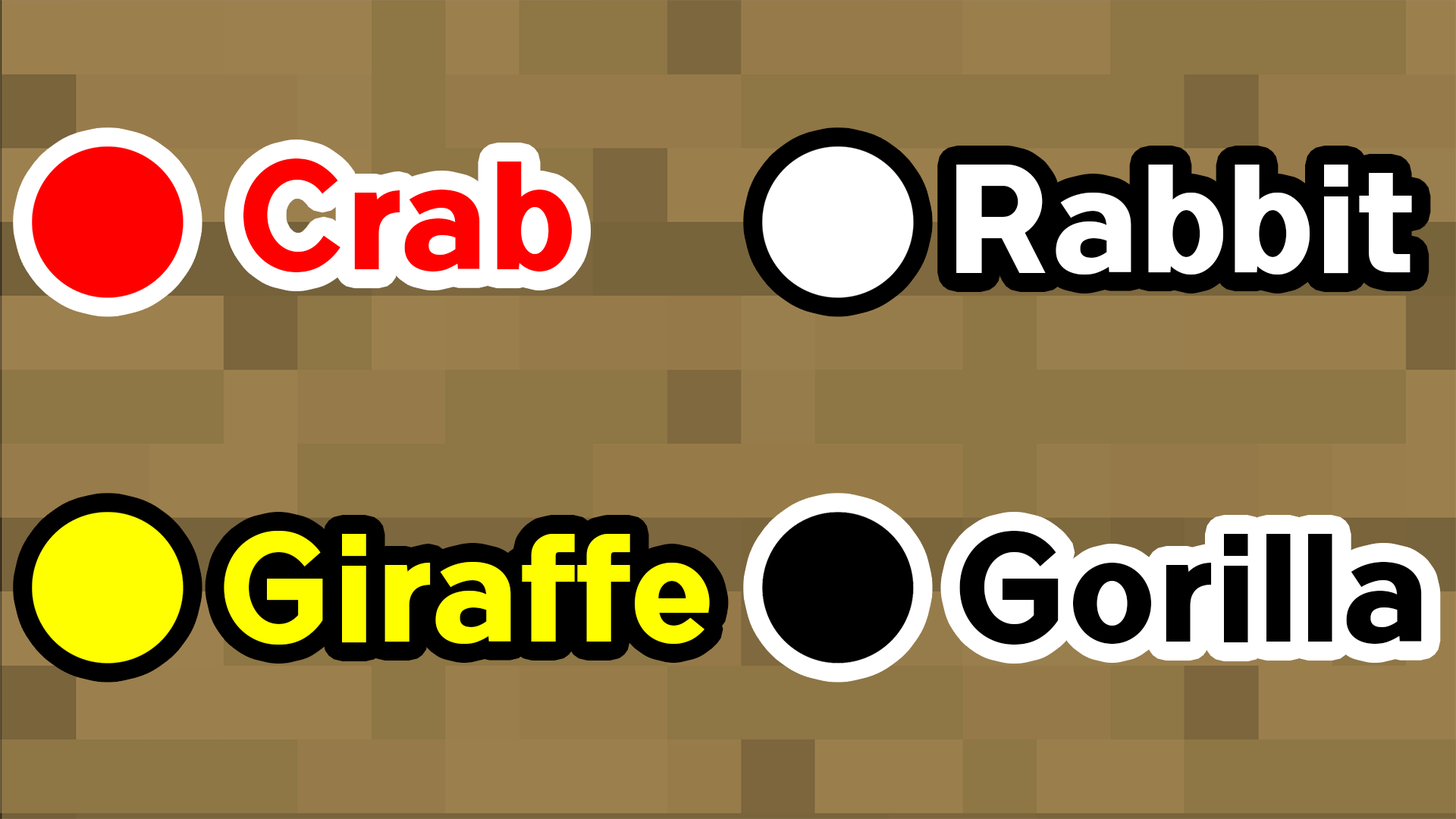
<style>
.page{position:relative;width:1456px;height:819px;background:#8e7645}
.page>*{position:absolute;margin:0}
.t1{font:151.7px "FlamantecaBold";color:#ff0000}
.t2{font:151.7px "FlamantecaBold";color:#ffffff}
.t3{font:151.7px "FlamantecaBold";color:#ffff00}
.t4{font:151.7px "FlamantecaBold";color:#000000}
</style>
<div class="page">
<p class="t1" style="left:243px;top:158px;width:329px;height:114px">Crab</p>
<p class="t2" style="left:956px;top:165px;width:456px;height:110px">Rabbit</p>
<p class="t3" style="left:224px;top:531px;width:486px;height:114px">Giraffe</p>
<p class="t4" style="left:959px;top:531px;width:463px;height:114px">Gorilla</p>
</div>
